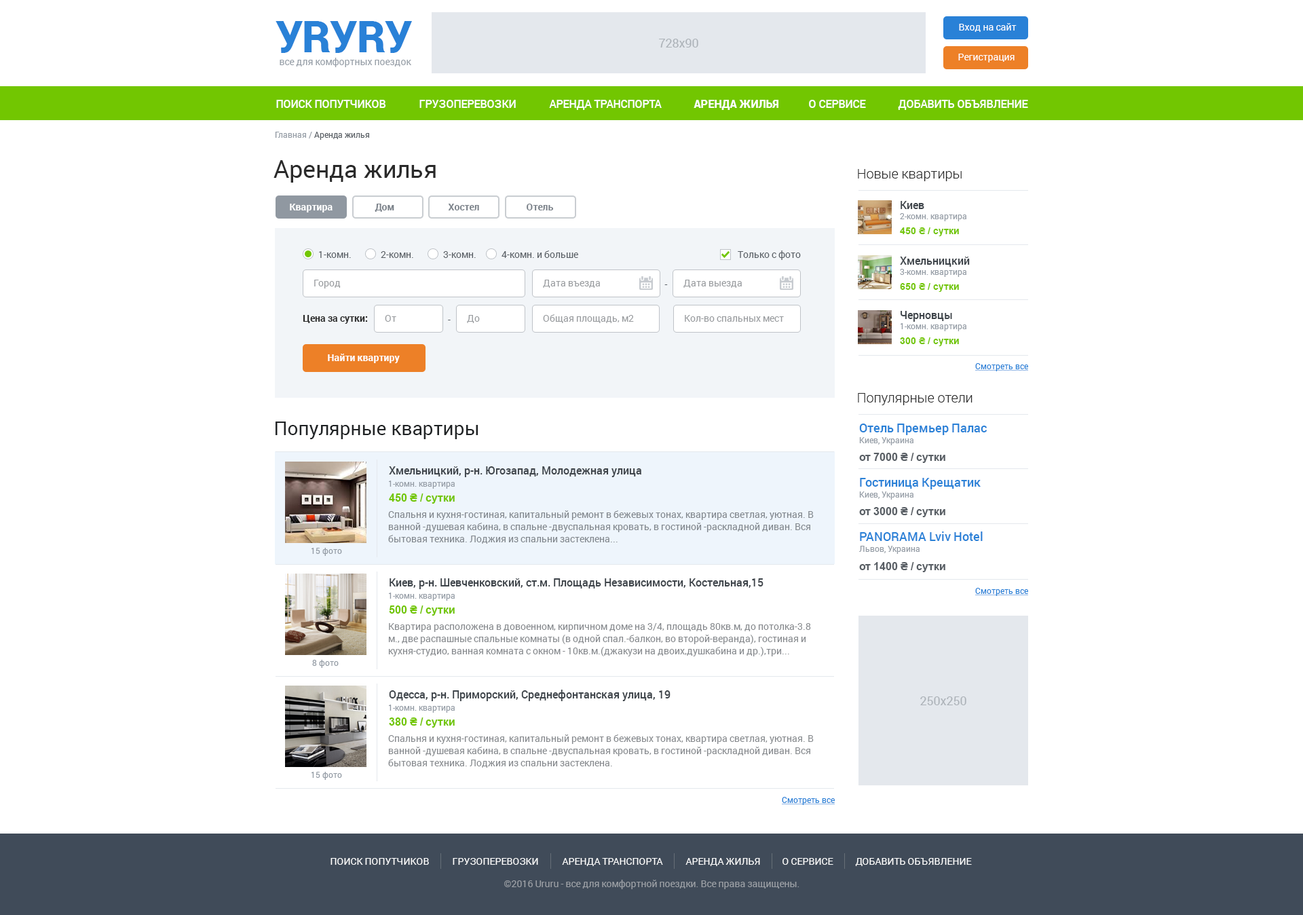
<style>
.page{position:relative;width:1303px;height:915px;background:#ffffff}
.page>*{position:absolute;margin:0}
.t1{font:43.4px "Roboto-Black";letter-spacing:-0.01em;color:#2981d7}
.t2{font:9.5px "Roboto-Regular";color:#ffffff}
.t3{font:12.2px "Roboto-Regular";color:#acb2b8}
.t4{font:9.5px "Roboto-Regular";color:#949ca5}
.t5{font:10.9px "Roboto-Medium";color:#ffffff;text-transform:uppercase}
.t6{font:10.9px "Roboto-Black";color:#ffffff;text-transform:uppercase}
.t7{font:8.1px "Roboto-Regular";color:#585e64}
.t8{font:8.1px "Roboto-Regular";color:#949ca5}
.t9{font:24.4px "Roboto-Regular";color:#2a2a2a}
.t10{font:13.6px "Roboto-Light";color:#2a2a2a}
.t11{font:9.5px "Roboto-Bold";color:#ffffff}
.t12{font:9.5px "Roboto-Bold";color:#7c838b}
.t13{font:10.9px "Roboto-Medium";color:#3f454b}
.t14{font:9.5px "Arial-BoldMT";color:#72c601}
.t15{font:9.5px "Roboto-Regular";color:#585e64}
.t16{font:9.5px "Roboto-Regular";color:#989b9e}
.t17{font:9.5px "Roboto-MediumItalic";color:#585e64}
.t18{font:9.5px "Roboto-Bold";color:#2a2a2a}
.t19{font:8.1px "Roboto-Regular";color:#2981d7;text-decoration:underline}
.t20{font:19px "Roboto-Regular";color:#202325}
.t21{font:12.2px "Roboto-Medium";color:#2981d7}
.t22{font:10.9px "Arial-BoldMT";color:#585e64}
.t23{font:10.9px "Arial-BoldMT";color:#72c601}
.t24{font:9.5px/12.2px "Roboto-Regular";color:#80868c}
.t25{font:9.5px/12.2px "Roboto-Regular";color:#86898d}
.t26{font:9.5px "Roboto-Regular";color:#ffffff;text-transform:uppercase}
.t27{font:9.5px "Roboto-Regular";color:#9ca0a6}
</style>
<div class="page">
<p class="t1" style="left:276px;top:21px;width:136px;height:32px">УRУRУ</p>
<p class="t2" style="left:959px;top:23px;width:58px;height:9px">Вход на сайт</p>
<p class="t3" style="left:659px;top:39px;width:39px;height:9px">728x90</p>
<p class="t2" style="left:958px;top:54px;width:57px;height:8px">Регистрация</p>
<p class="t4" style="left:280px;top:58px;width:131px;height:9px">все для комфортных поездок</p>
<p class="t5" style="left:276px;top:100px;width:110px;height:8px">Поиск попутчиков</p>
<p class="t5" style="left:419px;top:100px;width:97px;height:8px">грузоперевозки</p>
<p class="t5" style="left:549px;top:100px;width:113px;height:10px">Аренда транспорта</p>
<p class="t6" style="left:694px;top:100px;width:85px;height:10px">Аренда жилья</p>
<p class="t5" style="left:809px;top:100px;width:57px;height:8px">о сервисе</p>
<p class="t5" style="left:898px;top:100px;width:130px;height:10px">добавить объявление</p>
<p class="t7" style="left:275px;top:132px;width:94px;height:8px"><span class="t8">Главная /</span> Аренда жилья</p>
<p class="t9" style="left:274px;top:160px;width:162px;height:23px">Аренда жилья</p>
<p class="t10" style="left:858px;top:169px;width:104px;height:12px">Новые квартиры</p>
<p class="t11" style="left:290px;top:204px;width:43px;height:8px">Квартира</p>
<p class="t12" style="left:375px;top:204px;width:19px;height:8px">Дом</p>
<p class="t12" style="left:448px;top:204px;width:31px;height:6px">Хостел</p>
<p class="t12" style="left:527px;top:204px;width:27px;height:6px">Отель</p>
<p class="t13" style="left:901px;top:201px;width:23px;height:8px">Киев</p>
<p class="t8" style="left:900px;top:213px;width:67px;height:8px">2-комн. квартира</p>
<p class="t14" style="left:900px;top:227px;width:59px;height:9px">450 ₴ / сутки</p>
<p class="t15" style="left:319px;top:251px;width:32px;height:7px">1-комн.</p>
<p class="t15" style="left:381px;top:251px;width:32px;height:7px">2-комн.</p>
<p class="t15" style="left:443px;top:251px;width:33px;height:7px">3-комн.</p>
<p class="t15" style="left:502px;top:250px;width:76px;height:8px">4-комн. и больше</p>
<p class="t15" style="left:738px;top:250px;width:63px;height:10px">Только с фото</p>
<p class="t13" style="left:900px;top:257px;width:70px;height:10px">Хмельницкий</p>
<p class="t8" style="left:900px;top:269px;width:67px;height:8px">3-комн. квартира</p>
<p class="t16" style="left:314px;top:280px;width:27px;height:8px">Город</p>
<p class="t16" style="left:543px;top:280px;width:57px;height:8px">Дата въезда</p>
<p class="t16" style="left:684px;top:280px;width:58px;height:8px">Дата выезда</p>
<p class="t17" style="left:665px;top:284px;width:3px;height:1px">-</p>
<p class="t14" style="left:900px;top:283px;width:59px;height:9px">650 ₴ / сутки</p>
<p class="t18" style="left:303px;top:315px;width:65px;height:9px">Цена за сутки:</p>
<p class="t16" style="left:385px;top:315px;width:11px;height:7px">От</p>
<p class="t16" style="left:467px;top:315px;width:13px;height:8px">До</p>
<p class="t16" style="left:543px;top:314px;width:91px;height:9px">Общая площадь, м2</p>
<p class="t16" style="left:685px;top:315px;width:99px;height:7px">Кол-во спальных мест</p>
<p class="t13" style="left:901px;top:311px;width:51px;height:11px">Черновцы</p>
<p class="t15" style="left:448px;top:320px;width:3px;height:0px">-</p>
<p class="t8" style="left:901px;top:323px;width:66px;height:8px">1-комн. квартира</p>
<p class="t14" style="left:900px;top:337px;width:59px;height:9px">300 ₴ / сутки</p>
<p class="t11" style="left:328px;top:354px;width:72px;height:9px">Найти квартиру</p>
<p class="t19" style="left:975px;top:363px;width:53px;height:8px">Смотреть все</p>
<p class="t10" style="left:858px;top:393px;width:115px;height:12px">Популярные отели</p>
<p class="t20" style="left:276px;top:422px;width:203px;height:17px">Популярные квартиры</p>
<p class="t21" style="left:859px;top:424px;width:128px;height:11px">Отель Премьер Палас</p>
<p class="t8" style="left:859px;top:437px;width:55px;height:8px">Киев, Украина</p>
<p class="t22" style="left:859px;top:453px;width:87px;height:10px">от 7000 ₴ / сутки</p>
<p class="t13" style="left:389px;top:466px;width:252px;height:11px">Хмельницкий, р-н. Югозапад, Молодежная улица</p>
<p class="t8" style="left:389px;top:481px;width:66px;height:8px">1-комн. квартира</p>
<p class="t21" style="left:860px;top:478px;width:121px;height:11px">Гостиница Крещатик</p>
<p class="t23" style="left:389px;top:493px;width:66px;height:11px">450 ₴ / сутки</p>
<p class="t8" style="left:859px;top:491px;width:55px;height:9px">Киев, Украина</p>
<p class="t22" style="left:859px;top:507px;width:87px;height:10px">от 3000 ₴ / сутки</p>
<p class="t24" style="left:388px;top:510px;width:426px;height:34px">Спальня и кухня-гостиная, капитальный ремонт в бежевых тонах, квартира светлая, уютная. В ванной -душевая кабина, в спальне -двуспальная кровать, в гостиной -раскладной диван. Вся бытовая техника. Лоджия из спальни застеклена...</p>
<p class="t21" style="left:860px;top:531px;width:123px;height:10px">PANORAMA Lviv Hotel</p>
<p class="t8" style="left:859px;top:546px;width:61px;height:8px">Львов, Украина</p>
<p class="t8" style="left:312px;top:548px;width:30px;height:8px">15 фото</p>
<p class="t22" style="left:859px;top:562px;width:87px;height:10px">от 1400 ₴ / сутки</p>
<p class="t13" style="left:390px;top:578px;width:374px;height:11px">Киев, р-н. Шевченковский, ст.м. Площадь Независимости, Костельная,15</p>
<p class="t8" style="left:389px;top:593px;width:66px;height:8px">1-комн. квартира</p>
<p class="t19" style="left:975px;top:588px;width:53px;height:8px">Смотреть все</p>
<p class="t23" style="left:389px;top:605px;width:66px;height:11px">500 ₴ / сутки</p>
<p class="t25" style="left:388px;top:623px;width:423px;height:33px">Квартира расположена в довоенном, кирпичном доме на 3/4, площадь 80кв.м, до потолка-3.8м., две распашные спальные комнаты (в одной спал.-балкон, во второй-веранда), гостиная и кухня-студио, ванная комната с окном - 10кв.м.(джакузи на двоих,душкабина и др.),три...</p>
<p class="t8" style="left:312px;top:660px;width:27px;height:8px">8 фото</p>
<p class="t13" style="left:389px;top:690px;width:282px;height:11px">Одесса, р-н. Приморский, Среднефонтанская улица, 19</p>
<p class="t3" style="left:920px;top:696px;width:47px;height:9px">250х250</p>
<p class="t8" style="left:389px;top:705px;width:66px;height:8px">1-комн. квартира</p>
<p class="t23" style="left:389px;top:717px;width:66px;height:11px">380 ₴ / сутки</p>
<p class="t25" style="left:388px;top:734px;width:426px;height:34px">Спальня и кухня-гостиная, капитальный ремонт в бежевых тонах, квартира светлая, уютная. В ванной -душевая кабина, в спальне -двуспальная кровать, в гостиной -раскладной диван. Вся бытовая техника. Лоджия из спальни застеклена.</p>
<p class="t8" style="left:312px;top:772px;width:30px;height:8px">15 фото</p>
<p class="t19" style="left:782px;top:797px;width:53px;height:8px">Смотреть все</p>
<p class="t26" style="left:331px;top:858px;width:98px;height:7px">Поиск попутчиков</p>
<p class="t26" style="left:453px;top:858px;width:85px;height:7px">грузоперевозки</p>
<p class="t26" style="left:562px;top:858px;width:101px;height:8px">Аренда транспорта</p>
<p class="t26" style="left:686px;top:858px;width:74px;height:8px">Аренда жилья</p>
<p class="t26" style="left:783px;top:858px;width:51px;height:7px">о сервисе</p>
<p class="t26" style="left:855px;top:858px;width:117px;height:8px">добавить объявление</p>
<p class="t27" style="left:504px;top:880px;width:296px;height:9px">©2016 Ururu - все для комфортной поездки. Все права защищены.</p>
</div>
